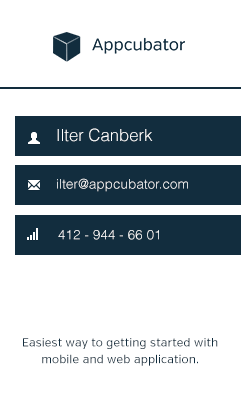
<style>
.page{position:relative;width:241px;height:397px;background:#ffffff}
.page>*{position:absolute;margin:0}
.t1{font:16.7px "Helvetica-Light";color:#ffffff}
.t2{font:13.3px "Helvetica-Light";letter-spacing:0.01em;color:#ffffff}
.t3{font:11.7px/16.7px "VerbRegular";letter-spacing:0.01em;color:#122d3e}
</style>
<div class="page">
<p class="t1" style="left:57px;top:128px;width:96px;height:14px">Ilter Canberk</p>
<p class="t2" style="left:57px;top:178px;width:131px;height:14px">ilter@appcubator.com</p>
<p class="t2" style="left:58px;top:230px;width:101px;height:10px">412 - 944 - 66 01</p>
<p class="t3" style="left:23px;top:338px;width:195px;height:28px;text-align:center">Easiest way to getting started with mobile and web application.</p>
</div>
